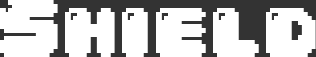
<style>
.page{position:relative;width:316px;height:57px;background:#ffffff}
.page>*{position:absolute;margin:0}
.t1{font:67.7px "04b30";letter-spacing:-0.005em;color:#ffffff;font-weight:bold}
</style>
<div class="page">
<p class="t1" style="left:0px;top:0px;width:316px;height:57px">Shield</p>
</div>
